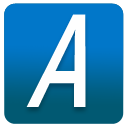
<style>
.page{position:relative;width:128px;height:128px;background:#0177c9}
.page>*{position:absolute;margin:0}
.t1{font:136.2px "SegoeUI-Semibold";letter-spacing:-0.025em;color:#fefefe;scale:0.66 1}
</style>
<div class="page">
<p class="t1" style="left:26px;top:14px;width:60px;height:93px">A</p>
</div>
